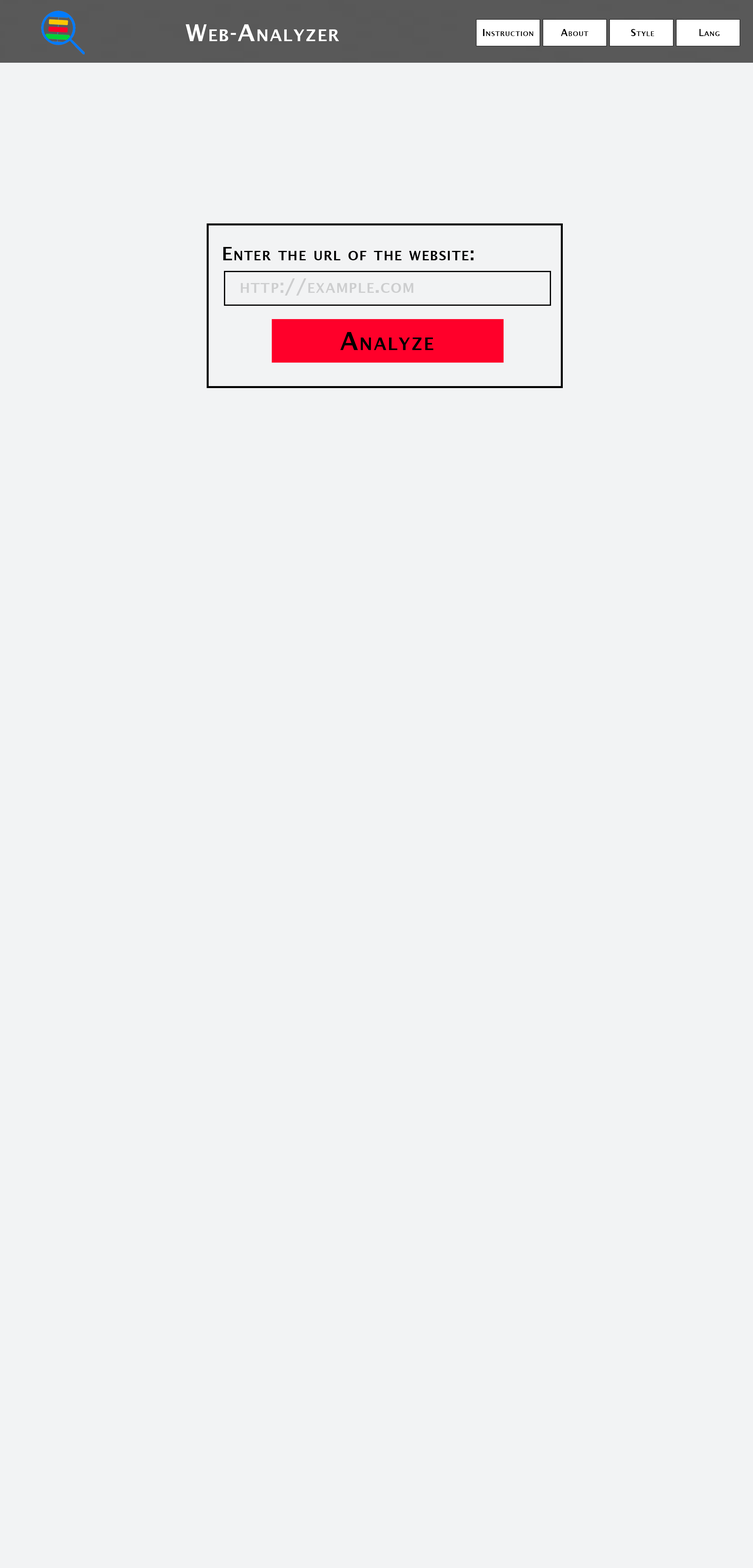
<style>
.page{position:relative;width:753px;height:1568px;background:#f2f3f4}
.page>*{position:absolute;margin:0}
.t1{font:23.5px "LucidaSans-Demi";letter-spacing:0.04em;color:#ffffff;font-variant:small-caps}
.t2{font:18.3px "LucidaSans-Demi";letter-spacing:0.04em;color:#000000;font-variant:small-caps}
.t3{font:19px "LucidaSans-Demi";letter-spacing:0.04em;color:#cdcecf;font-variant:small-caps}
.t4{font:24.8px "LucidaSans-Demi";letter-spacing:0.04em;color:#000000;font-variant:small-caps}
</style>
<div class="page">
<p class="t1" style="left:185px;top:24px;width:154px;height:17px">Web-Analyzer</p>
<p class="t2" style="left:223px;top:247px;width:251px;height:13px">Enter the url of the website:</p>
<p class="t3" style="left:241px;top:278px;width:172px;height:18px">http://example.com</p>
<p class="t4" style="left:340px;top:332px;width:93px;height:18px">Analyze</p>
</div>
